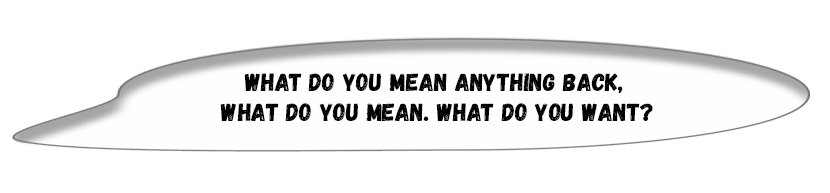
<style>
.page{position:relative;width:830px;height:193px;background:#ffffff}
.page>*{position:absolute;margin:0}
.t1{font:25px "Gagalin-Regular";color:#000000}
</style>
<div class="page">
<p class="t1" style="left:220px;top:73px;width:433px;height:48px;text-align:center">What do you mean anything back, <br>what do you mean. What do you want?</p>
</div>
